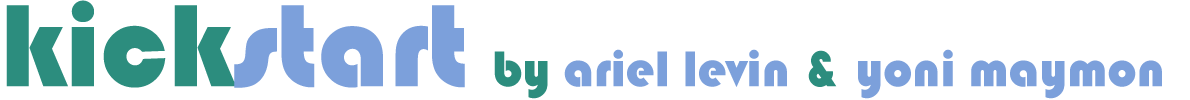
<style>
.page{position:relative;width:1190px;height:100px;background:#ffffff}
.page>*{position:absolute;margin:0}
.t1{font:52px "Bauhaus93";color:#7ca0db}
.t2{font:121px "Bauhaus93";color:#2c8d7e}
.t3{font:121px "Bauhaus93";color:#7ca0db}
.t4{font:52px "Bauhaus93";color:#2c8d7e}
</style>
<div class="page">
<p class="t1" style="left:6px;top:0px;width:1156px;height:99px"><span class="t2">kick</span><span class="t3">start    </span><span class="t4">by </span>ariel levin<span class="t4"> &amp; </span>yoni maymon</p>
</div>
